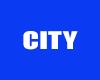
<style>
.page{position:relative;width:100px;height:80px;background:#0a3bf3}
.page>*{position:absolute;margin:0}
.t1{font:22.5px "Impact";letter-spacing:0.001em;color:#ffffff;scale:1.36 1}
</style>
<div class="page">
<p class="t1" style="left:23px;top:31px;width:55px;height:19px">CITY</p>
</div>
